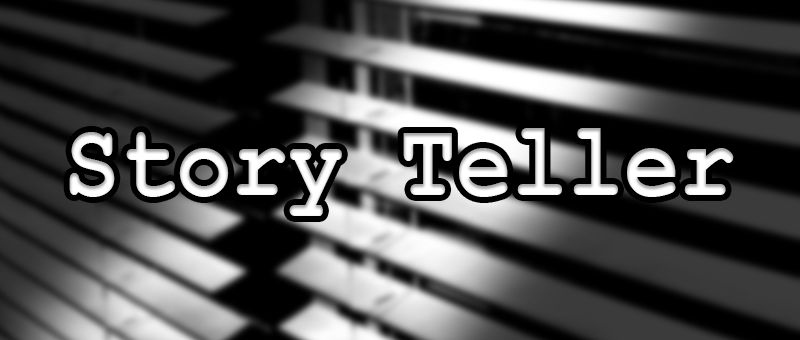
<style>
.page{position:relative;width:800px;height:340px;background:#000000}
.page>*{position:absolute;margin:0}
.t1{font:109.3px "CourierNewPS-BoldMT";color:#ffffff;scale:0.85 1}
</style>
<div class="page">
<p class="t1" style="left:69px;top:128px;width:665px;height:88px">Story Teller</p>
</div>
